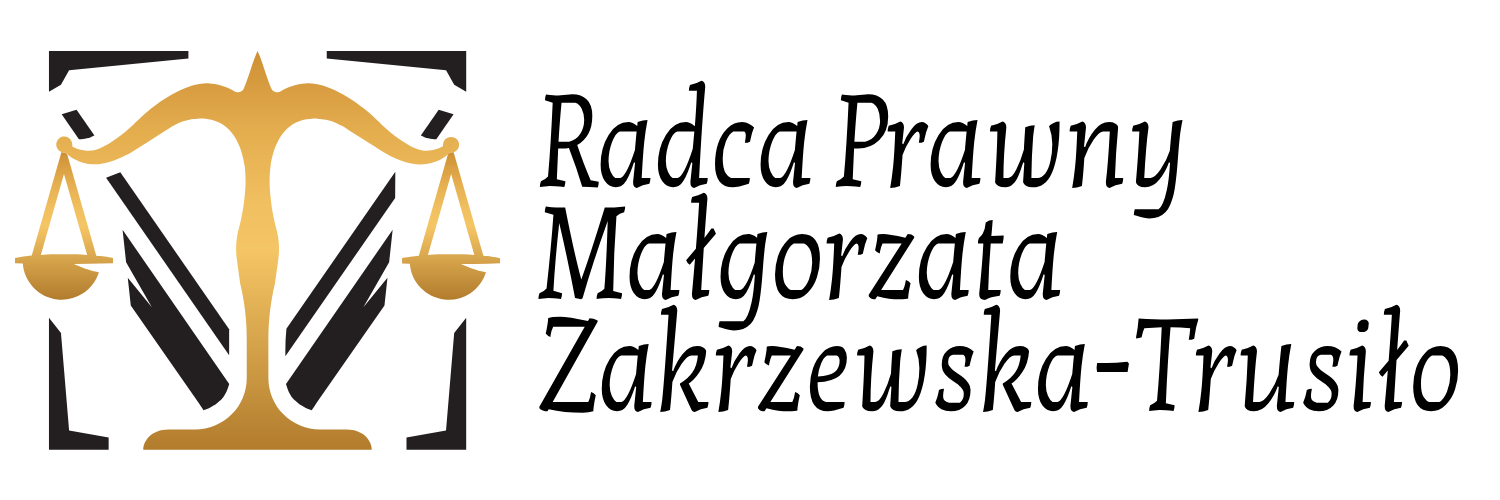
<style>
.page{position:relative;width:1500px;height:500px;background:#ffffff}
.page>*{position:absolute;margin:0}
.t1{font:133.1px/112px "KottaOne-Regular";color:#000000;scale:0.78 1}
</style>
<div class="page">
<p class="t1" style="left:538px;top:80px;width:921px;height:333px">Radca Prawny<br>Małgorzata<br>Zakrzewska-Trusiło</p>
</div>
